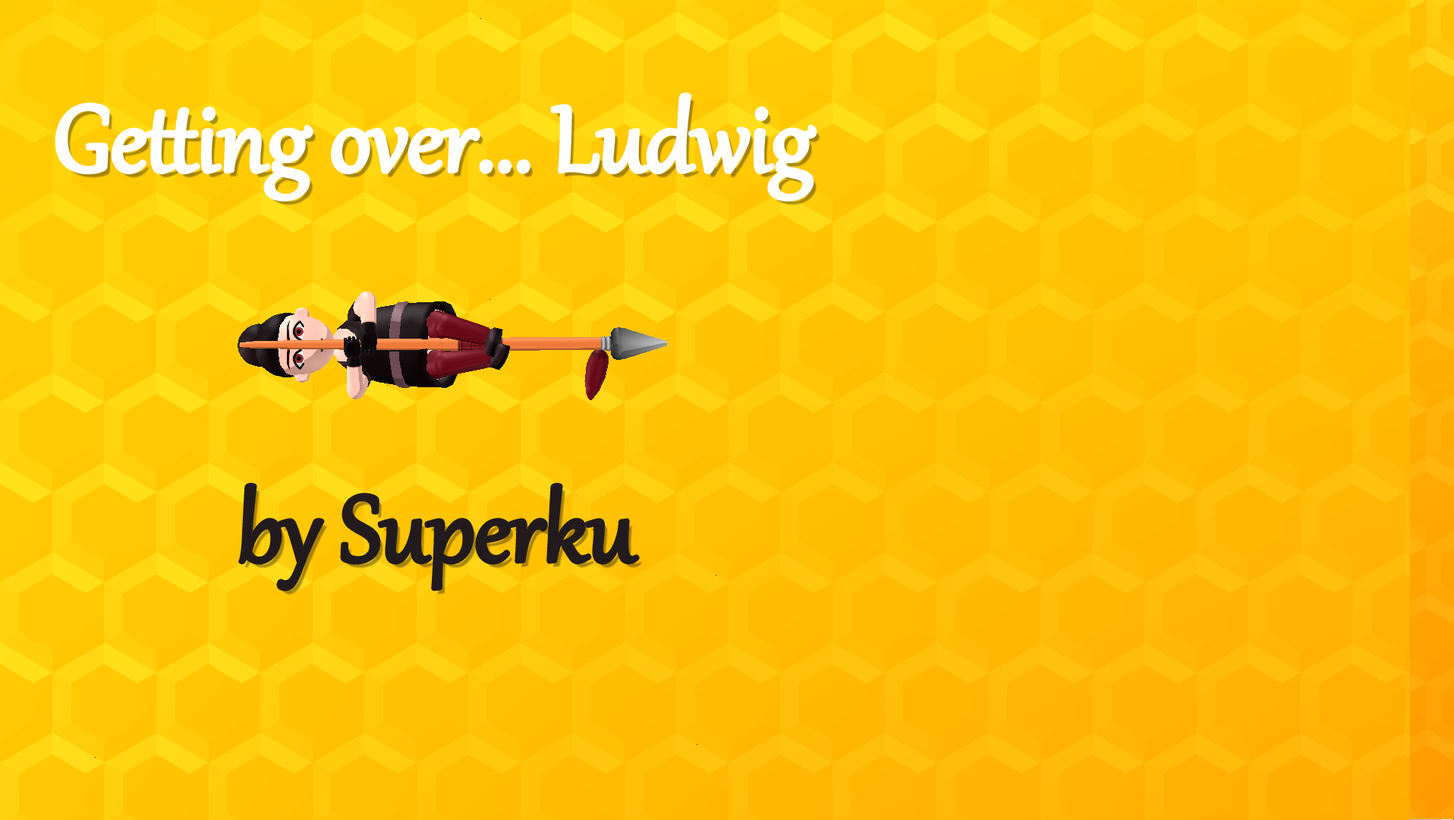
<style>
.page{position:relative;width:1454px;height:820px}
.page>*{position:absolute;margin:0}
.t1{font:113.9px "Gabriola";color:#fefefe}
.t2{font:113.9px "Gabriola";color:#221b1d}
</style>
<div class="page">
<p class="t1" style="left:57px;top:94px;width:758px;height:106px">Getting over... Ludwig</p>
<p class="t2" style="left:241px;top:484px;width:397px;height:105px">by Superku</p>
</div>
